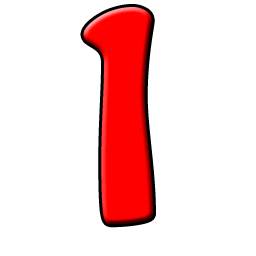
<style>
.page{position:relative;width:256px;height:256px;background:#ffffff}
.page>*{position:absolute;margin:0}
.t1{font:250px "HoboStd";color:#ff0000;font-weight:bold}
</style>
<div class="page">
<p class="t1" style="left:83px;top:7px;width:70px;height:218px">1</p>
</div>
